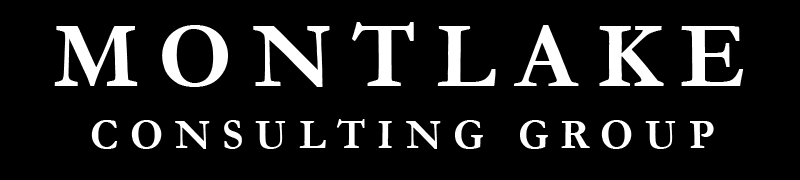
<style>
.page{position:relative;width:800px;height:180px;background:#000000}
.page>*{position:absolute;margin:0}
.t1{font:94px "Garamond-Bold";letter-spacing:0.21em;color:#ffffff}
.t2{font:42px "Garamond-Bold";letter-spacing:0.28em;color:#ffffff}
</style>
<div class="page">
<p class="t1" style="left:54px;top:22px;width:690px;height:65px">MONTLAKE</p>
<p class="t2" style="left:91px;top:119px;width:623px;height:30px">CONSULTING GROUP</p>
</div>
